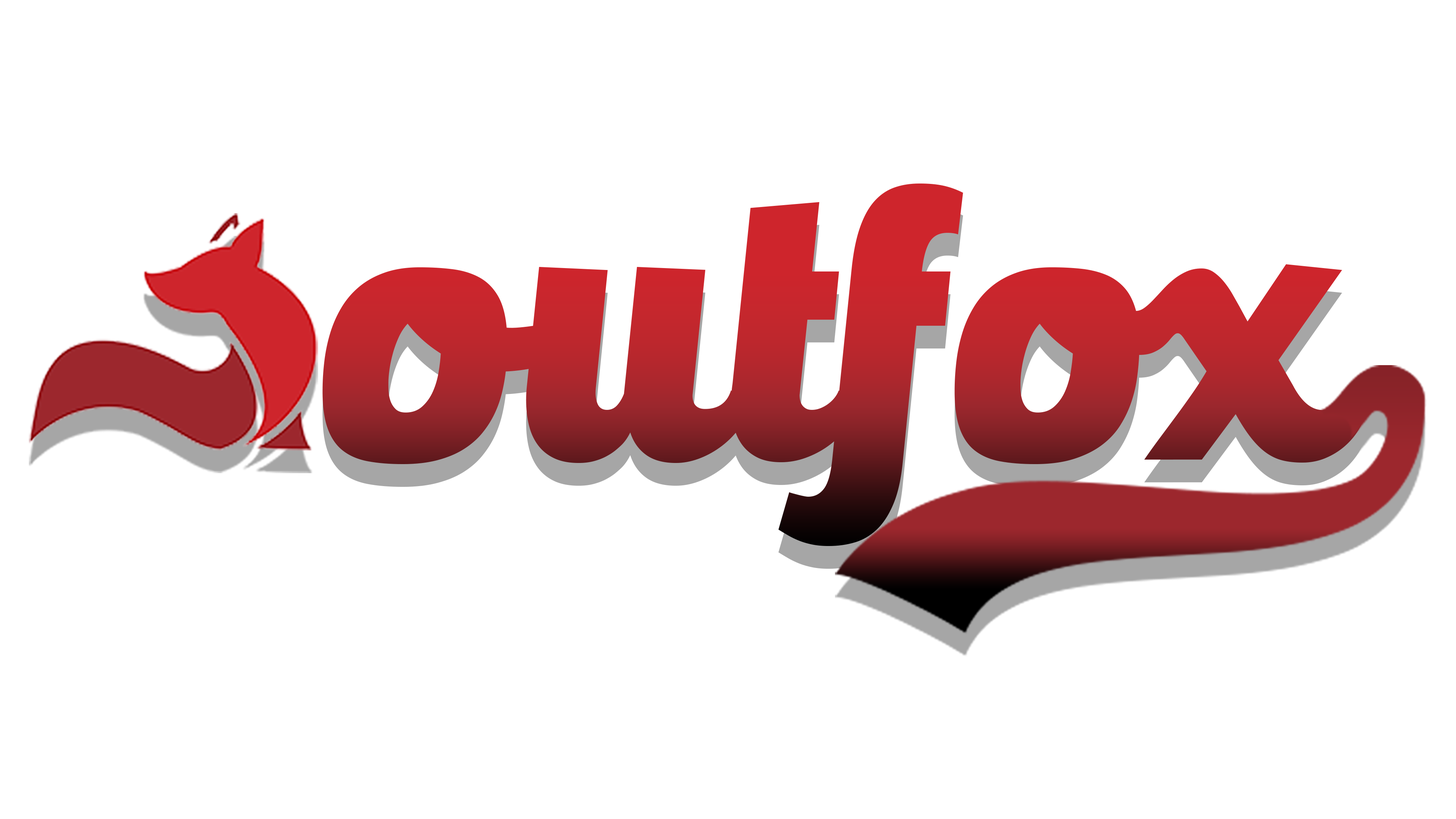
<style>
.page{position:relative;width:1456px;height:819px;background:#ffffff}
.page>*{position:absolute;margin:0}
.t1{font:359.3px "BullettoKilla"}
</style>
<div class="page">
<p class="t1" style="left:322px;top:184px;width:1044px;height:362px">outfox</p>
</div>
